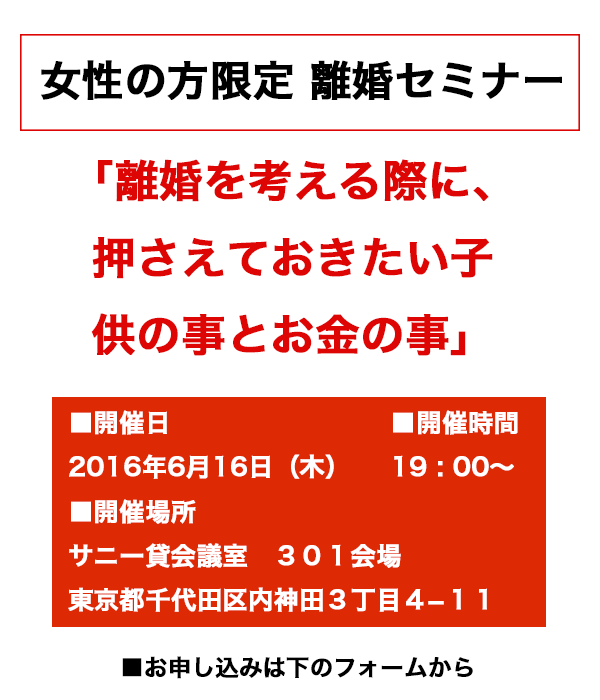
<style>
.page{position:relative;width:600px;height:700px;background:#ffffff}
.page>*{position:absolute;margin:0}
.t1{font:41.9px "HiraKakuProN-W6";letter-spacing:-0.01em;color:#000000;font-weight:bold}
.t2{font:44px "HiraKakuProN-W6";letter-spacing:-0.01em;color:#de0505;font-weight:bold}
.t3{font:25.2px "HiraKakuProN-W6";letter-spacing:-0.01em;color:#ffffff;font-weight:bold}
.t4{font:23.3px "HiraKakuProN-W6";letter-spacing:-0.01em;color:#000000;font-weight:bold}
</style>
<div class="page">
<p class="t1" style="left:41px;top:60px;width:521px;height:40px">女性の方限定 離婚セミナー</p>
<p class="t2" style="left:91px;top:159px;width:402px;height:197px;text-align:center">「離婚を考える際に、<br>押さえておきたい子<br>供の事とお金の事」</p>
<p class="t3" style="left:69px;top:410px;width:265px;height:69px">■開催日<br>2016年6月16日（木）</p>
<p class="t3" style="left:393px;top:410px;width:125px;height:67px">■開催時間<br>19 : 00〜</p>
<p class="t3" style="left:68px;top:499px;width:419px;height:113px">■開催場所<br>サニー貸会議室　３０１会場<br>東京都千代田区内神田３丁目４−１１</p>
<p class="t4" style="left:122px;top:656px;width:351px;height:23px">■お申し込みは下のフォームから</p>
</div>
